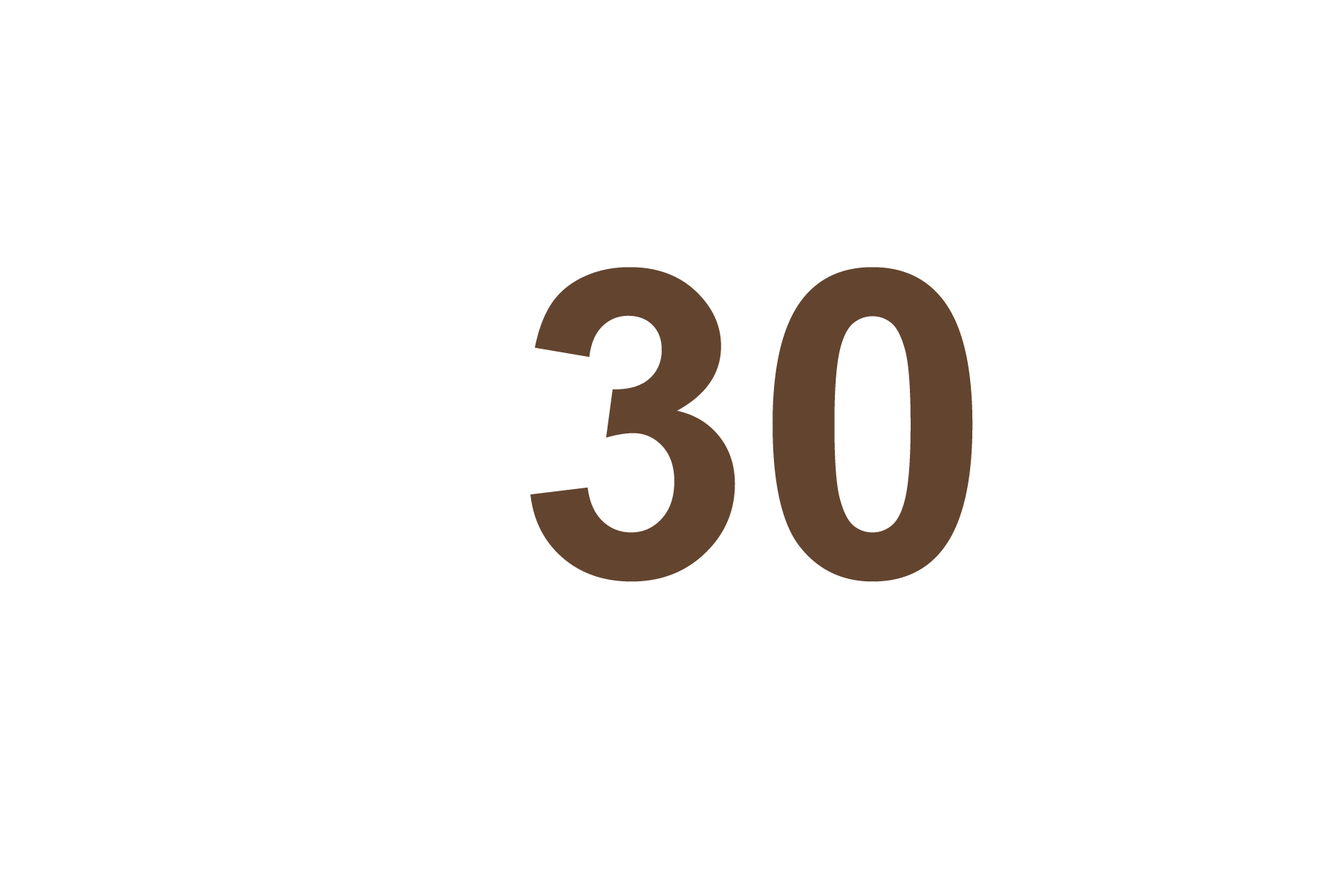
<style>
.page{position:relative;width:1337px;height:892px;background:#ffffff}
.page>*{position:absolute;margin:0}
.t1{font:429.6px "Arial-BoldMT";color:#63442f}
</style>
<div class="page">
<p class="t1" style="left:531px;top:267px;width:442px;height:315px">30</p>
</div>
